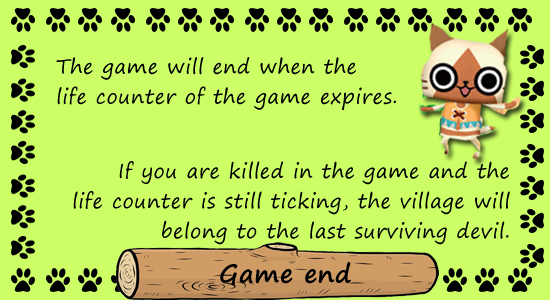
<style>
.page{position:relative;width:550px;height:300px;background:#ccff66}
.page>*{position:absolute;margin:0}
.t1{font:20px/30px "SegoePrint";letter-spacing:0.025em;color:#000000}
.t2{font:25px "SegoePrint-Bold";letter-spacing:0.025em;color:#000000}
</style>
<div class="page">
<p class="t1" style="left:56px;top:57px;width:340px;height:54px">The game will end when the <br>life counter of the game expires.</p>
<p class="t1" style="left:73px;top:161px;width:437px;height:84px;text-align:right">If you are killed in the game and the <br>life counter is still ticking, the village will belong to the last surviving devil.</p>
<p class="t2" style="left:220px;top:262px;width:131px;height:24px">Game end</p>
</div>
